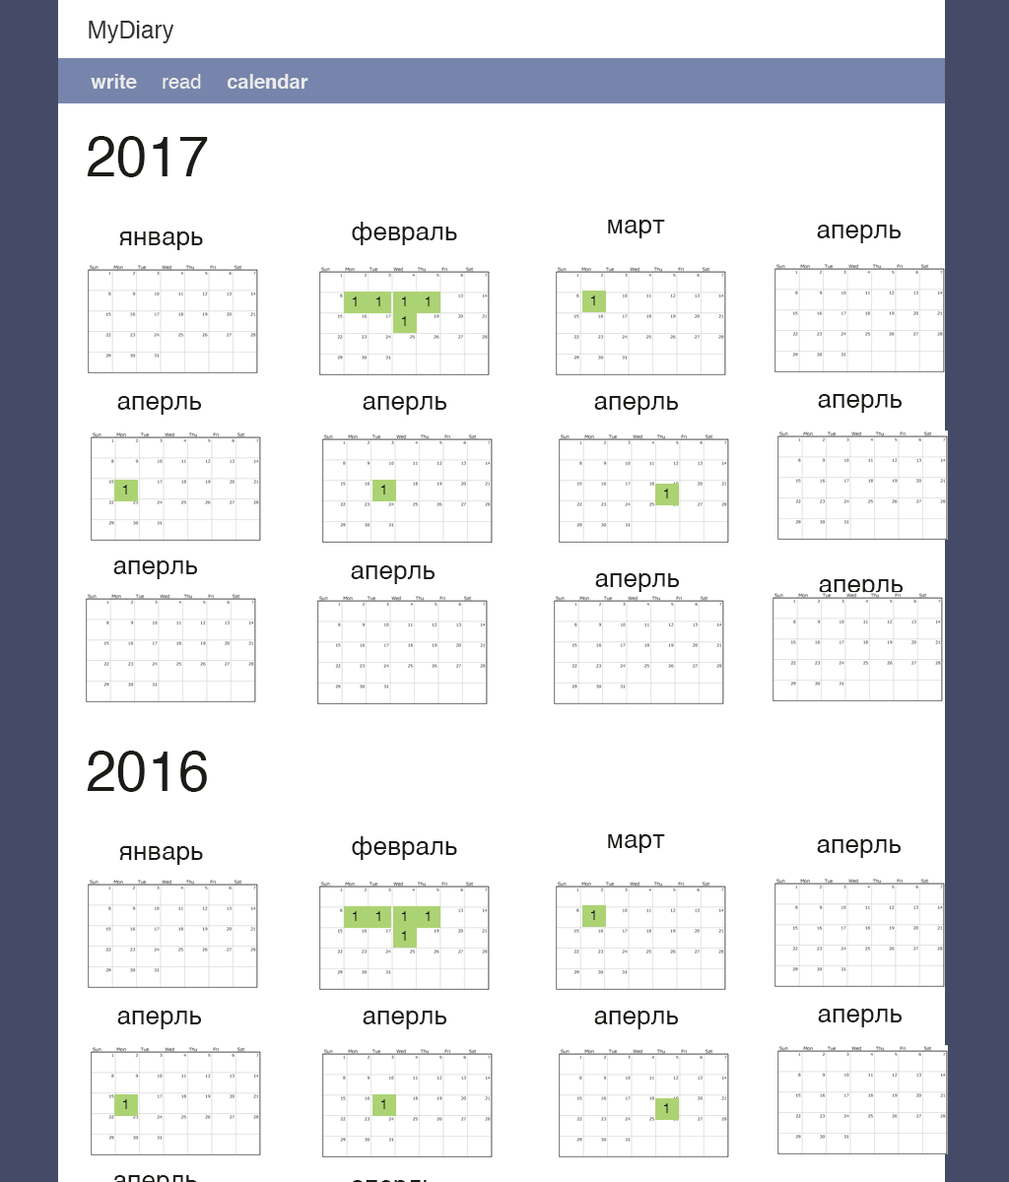
<style>
.page{position:relative;width:1009px;height:1182px;background:#ffffff}
.page>*{position:absolute;margin:0}
.t1{font:23.6px "Helvetica";color:#333333}
.t2{font:19.7px "Helvetica-Bold";color:#ebebeb}
.t3{font:19.7px "Helvetica";color:#ebebeb}
.t4{font:55.2px "Helvetica";color:#1b1c17}
.t5{font:25.6px "Helvetica";color:#1b1c17}
.t6{font:12.8px "Helvetica";color:#121212}
</style>
<div class="page">
<p class="t1" style="left:89px;top:21px;width:85px;height:22px">MyDiary</p>
<p class="t2" style="left:91px;top:74px;width:46px;height:15px">write</p>
<p class="t3" style="left:163px;top:74px;width:38px;height:15px">read</p>
<p class="t2" style="left:228px;top:74px;width:80px;height:15px">calendar</p>
<p class="t4" style="left:87px;top:136px;width:121px;height:41px">2017</p>
<p class="t5" style="left:352px;top:222px;width:105px;height:23px">февраль</p>
<p class="t5" style="left:608px;top:220px;width:57px;height:18px">март</p>
<p class="t5" style="left:119px;top:231px;width:84px;height:19px">январь</p>
<p class="t5" style="left:817px;top:225px;width:83px;height:18px">аперль</p>
<p class="t6" style="left:353px;top:297px;width:4px;height:9px">1</p>
<p class="t6" style="left:376px;top:297px;width:4px;height:9px">1</p>
<p class="t6" style="left:402px;top:297px;width:4px;height:9px">1</p>
<p class="t6" style="left:426px;top:297px;width:3px;height:9px">1</p>
<p class="t6" style="left:591px;top:296px;width:4px;height:9px">1</p>
<p class="t6" style="left:402px;top:316px;width:4px;height:10px">1</p>
<p class="t5" style="left:117px;top:396px;width:84px;height:19px">аперль</p>
<p class="t5" style="left:363px;top:396px;width:83px;height:19px">аперль</p>
<p class="t5" style="left:594px;top:396px;width:84px;height:19px">аперль</p>
<p class="t5" style="left:818px;top:394px;width:83px;height:19px">аперль</p>
<p class="t6" style="left:123px;top:485px;width:4px;height:10px">1</p>
<p class="t6" style="left:381px;top:485px;width:4px;height:10px">1</p>
<p class="t6" style="left:664px;top:489px;width:4px;height:9px">1</p>
<p class="t5" style="left:113px;top:561px;width:84px;height:18px">аперль</p>
<p class="t5" style="left:351px;top:565px;width:83px;height:19px">аперль</p>
<p class="t5" style="left:595px;top:573px;width:84px;height:19px">аперль</p>
<p class="t5" style="left:819px;top:579px;width:83px;height:19px">аперль</p>
<p class="t4" style="left:87px;top:751px;width:120px;height:41px">2016</p>
<p class="t5" style="left:352px;top:836px;width:105px;height:24px">февраль</p>
<p class="t5" style="left:608px;top:834px;width:57px;height:19px">март</p>
<p class="t5" style="left:817px;top:839px;width:83px;height:19px">аперль</p>
<p class="t5" style="left:119px;top:846px;width:84px;height:19px">январь</p>
<p class="t6" style="left:353px;top:911px;width:4px;height:10px">1</p>
<p class="t6" style="left:376px;top:911px;width:4px;height:10px">1</p>
<p class="t6" style="left:402px;top:911px;width:4px;height:10px">1</p>
<p class="t6" style="left:426px;top:911px;width:3px;height:10px">1</p>
<p class="t6" style="left:591px;top:910px;width:4px;height:10px">1</p>
<p class="t6" style="left:402px;top:931px;width:4px;height:10px">1</p>
<p class="t5" style="left:117px;top:1011px;width:84px;height:18px">аперль</p>
<p class="t5" style="left:363px;top:1011px;width:83px;height:18px">аперль</p>
<p class="t5" style="left:594px;top:1011px;width:84px;height:18px">аперль</p>
<p class="t5" style="left:818px;top:1009px;width:83px;height:18px">аперль</p>
<p class="t6" style="left:123px;top:1099px;width:4px;height:10px">1</p>
<p class="t6" style="left:381px;top:1099px;width:4px;height:10px">1</p>
<p class="t6" style="left:664px;top:1103px;width:4px;height:10px">1</p>
</div>
